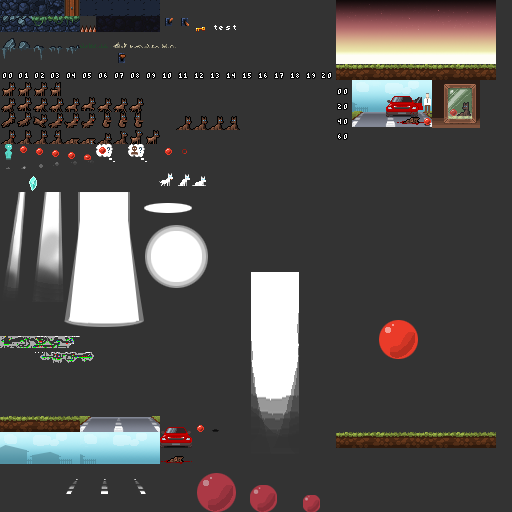
<style>
.page{position:relative;width:512px;height:512px;background:#333333}
.page>*{position:absolute;margin:0}
.t1{font:8px "04b03";letter-spacing:0.22em;color:#ffffff}
.t2{font:6px/16px "Terminal";letter-spacing:0.22em;color:#ffffff}
</style>
<div class="page">
<p class="t1" style="left:214px;top:25px;width:22px;height:5px">test</p>
<p class="t2" style="left:3px;top:73px;width:344px;height:66px;text-align:right">00 01 02 03 04 05 06 07 08 09 10 11 12 13 14 15 16 17 18 19 20   <br>00<br>20<br>40<br>60</p>
</div>
